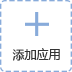
<style>
.page{position:relative;width:72px;height:72px;background:#ffffff}
.page>*{position:absolute;margin:0}
.t1{font:12px "MicrosoftYaHei";color:#333333;text-transform:uppercase}
</style>
<div class="page">
<p class="t1" style="left:12px;top:48px;width:48px;height:13px">添加应用</p>
</div>
